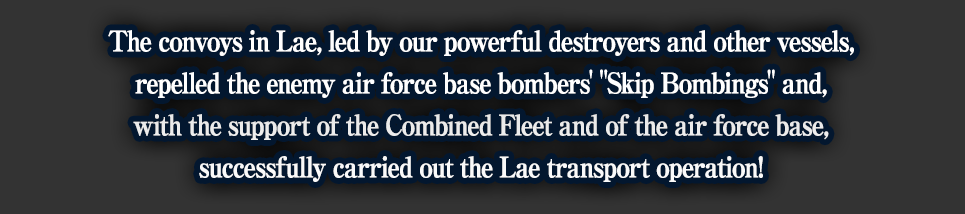
<style>
.page{position:relative;width:965px;height:214px;background:#333333}
.page>*{position:absolute;margin:0}
.t1{font:28px/42px "RyuminPro-ExBold";letter-spacing:-0.08em;color:#ffffff;font-weight:bold;scale:0.9 1}
</style>
<div class="page">
<p class="t1" style="left:108px;top:30px;width:746px;height:152px;text-align:center">The convoys in Lae, led by our powerful destroyers and other vessels,<br>repelled the enemy air force base bombers' "Skip Bombings" and,<br>with the support of the Combined Fleet and of the air force base,<br>successfully carried out the Lae transport operation!</p>
</div>
